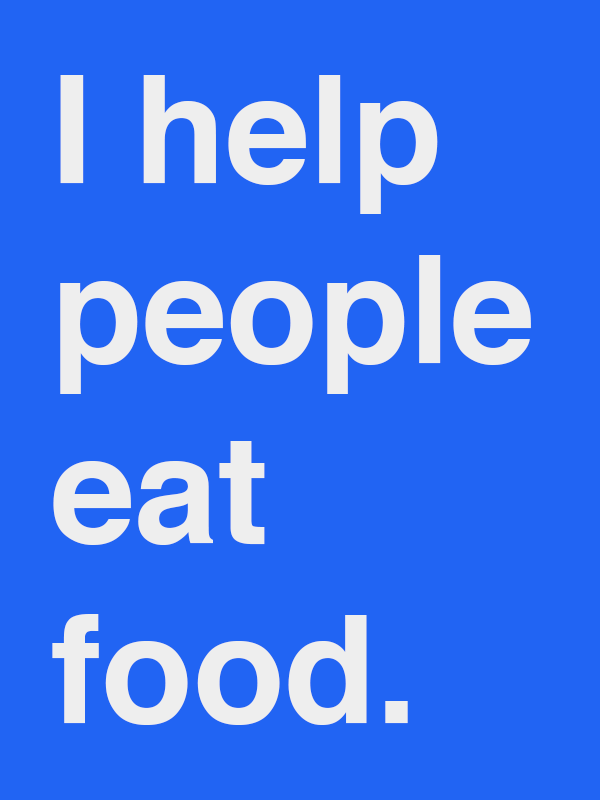
<style>
.page{position:relative;width:600px;height:800px;background:#2164f3}
.page>*{position:absolute;margin:0}
.t1{font:150px "Helvetica-Bold";color:#eeeeee}
</style>
<div class="page">
<p class="t1" style="left:52px;top:75px;width:479px;height:650px">I help people<br>eat <br>food.</p>
</div>
